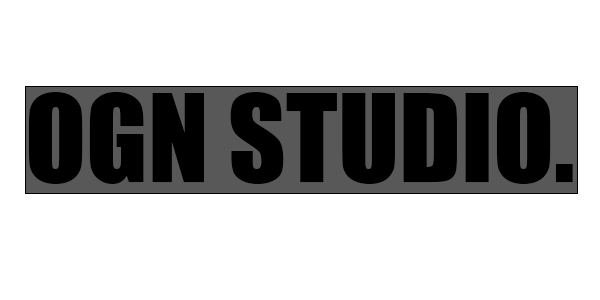
<style>
.page{position:relative;width:600px;height:300px;background:#ffffff}
.page>*{position:absolute;margin:0}
.t1{font:111.9px "Impact";color:#000000}
</style>
<div class="page">
<p class="t1" style="left:28px;top:92px;width:545px;height:92px">OGN STUDIO.</p>
</div>
